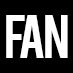
<style>
.page{position:relative;width:73px;height:73px;background:#000000}
.page>*{position:absolute;margin:0}
.t1{font:48px "Bebas";letter-spacing:-0.075em;color:#ffffff}
</style>
<div class="page">
<p class="t1" style="left:6px;top:15px;width:62px;height:43px">FAN</p>
</div>
